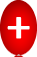
<style>
.page{position:relative;width:37px;height:57px;background:#ffffff}
.page>*{position:absolute;margin:0}
.t1{font:48px "Calibri";color:#ffffff;font-weight:bold}
</style>
<div class="page">
<p class="t1" style="left:7px;top:17px;width:23px;height:22px">+</p>
</div>
